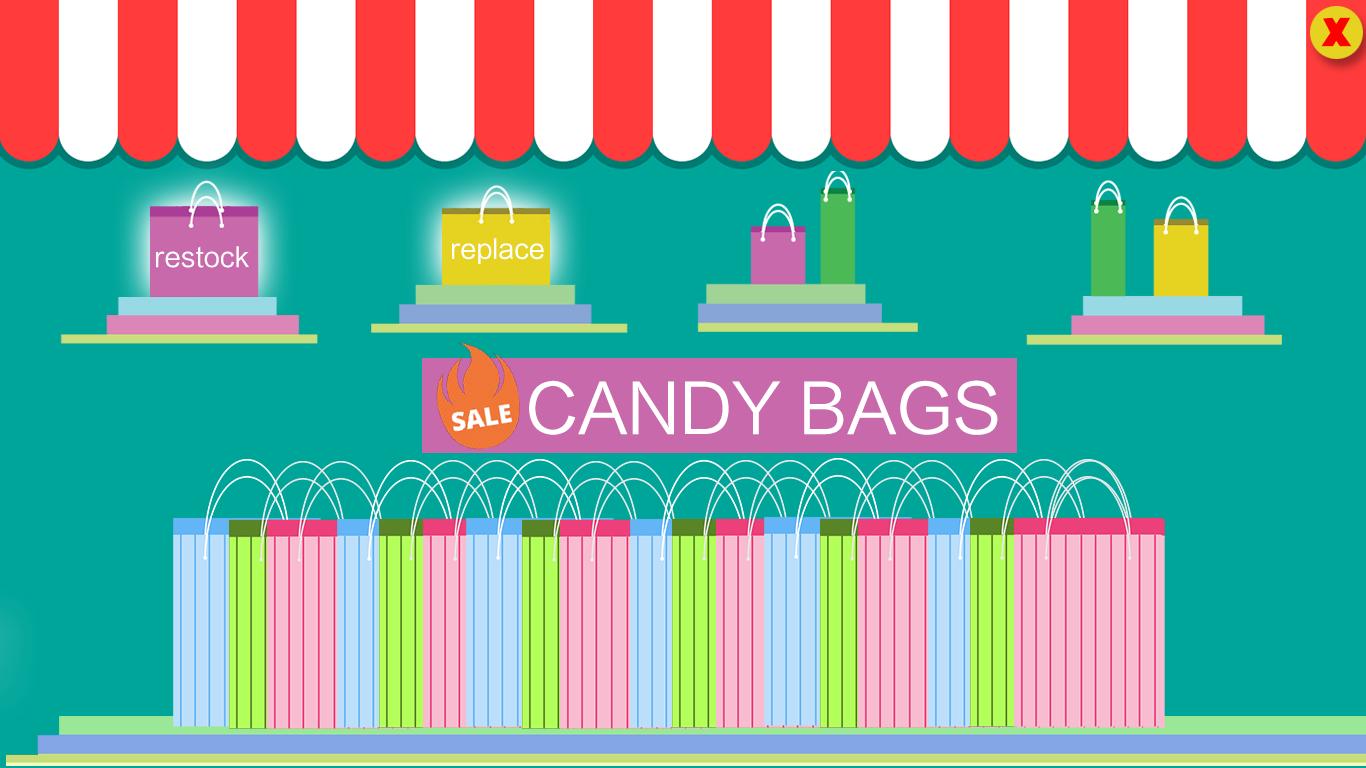
<style>
.page{position:relative;width:1366px;height:768px;background:#00a59a}
.page>*{position:absolute;margin:0}
.t1{font:35.5px "CartoonistKooky";color:#ff0000;scale:1.34 1}
.t2{font:26.6px "LTHYSZK";color:#ffffff}
.t3{font:26.3px "LTHYSZK";color:#ffffff}
.t4{font:66.7px "LTHYSZK";color:#ffffff}
</style>
<div class="page">
<p class="t1" style="left:1321px;top:17px;width:31px;height:30px">x</p>
<p class="t2" style="left:156px;top:246px;width:93px;height:22px">restock</p>
<p class="t3" style="left:452px;top:238px;width:92px;height:26px">replace</p>
<p class="t4" style="left:529px;top:380px;width:469px;height:55px">CANDY BAGS</p>
</div>
